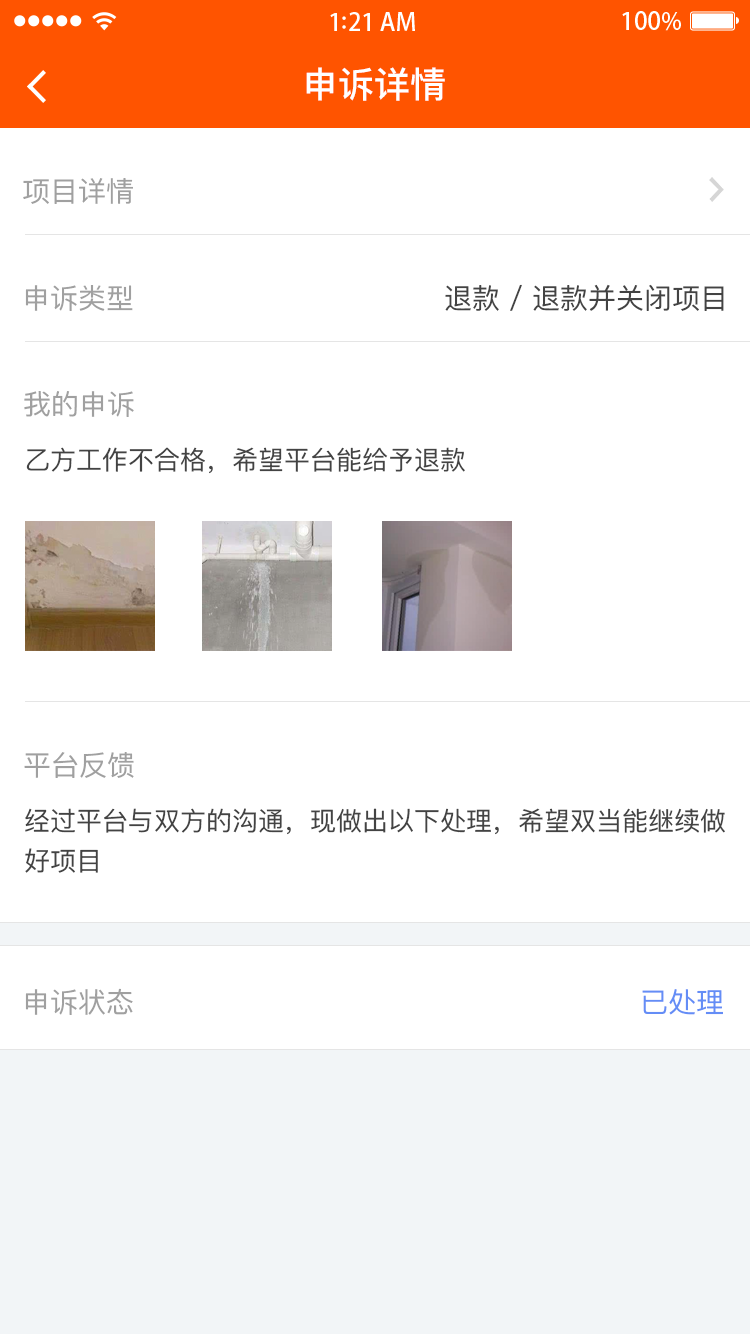
<style>
.page{position:relative;width:750px;height:1334px;background:#ffffff}
.page>*{position:absolute;margin:0}
.t1{font:36px "PingFangSC-Medium";color:#ffffff}
.t2{font:28px "PingFangSC-Regular";color:#a0a0a0}
.t3{font:28px "PingFangSC-Regular";color:#434343}
.t4{font:26px "PingFangSC-Regular";color:#434343}
.t5{font:26px/44px "PingFangSC-Regular";color:#434343}
.t6{font:28px "PingFangSC-Regular";color:#648df6}
</style>
<div class="page">
<p class="t1" style="left:306px;top:67px;width:139px;height:34px">申诉详情</p>
<p class="t2" style="left:23px;top:178px;width:110px;height:26px">项目详情</p>
<p class="t2" style="left:25px;top:285px;width:108px;height:26px">申诉类型</p>
<p class="t3" style="left:445px;top:284px;width:279px;height:27px">退款 / 退款并关闭项目</p>
<p class="t2" style="left:24px;top:391px;width:110px;height:26px">我的申诉</p>
<p class="t4" style="left:26px;top:447px;width:439px;height:27px">乙方工作不合格，希望平台能给予退款</p>
<p class="t2" style="left:24px;top:752px;width:110px;height:26px">平台反馈</p>
<p class="t5" style="left:25px;top:808px;width:700px;height:65px">经过平台与双方的沟通，现做出以下处理，希望双当能继续做<br>好项目</p>
<p class="t2" style="left:25px;top:988px;width:108px;height:27px">申诉状态</p>
<p class="t6" style="left:642px;top:989px;width:81px;height:26px">已处理</p>
</div>
